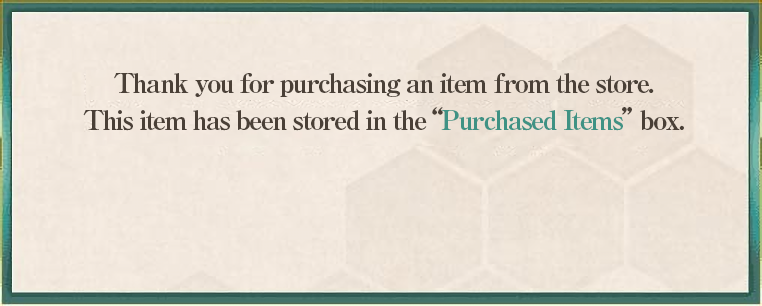
<style>
.page{position:relative;width:762px;height:306px}
.page>*{position:absolute;margin:0}
.t1{font:27px/37px "RyuminPro-ExBold";letter-spacing:-0.08em;color:#4a4037}
.t2{font:27px/37px "RyuminPro-ExBold";letter-spacing:-0.08em;color:#3f9284}
</style>
<div class="page">
<p class="t1" style="left:83px;top:73px;width:601px;height:58px;text-align:center">Thank you for purchasing an item from the store.<br>This item has been stored in the“<span class="t2">Purchased Items</span>”box.</p>
</div>
